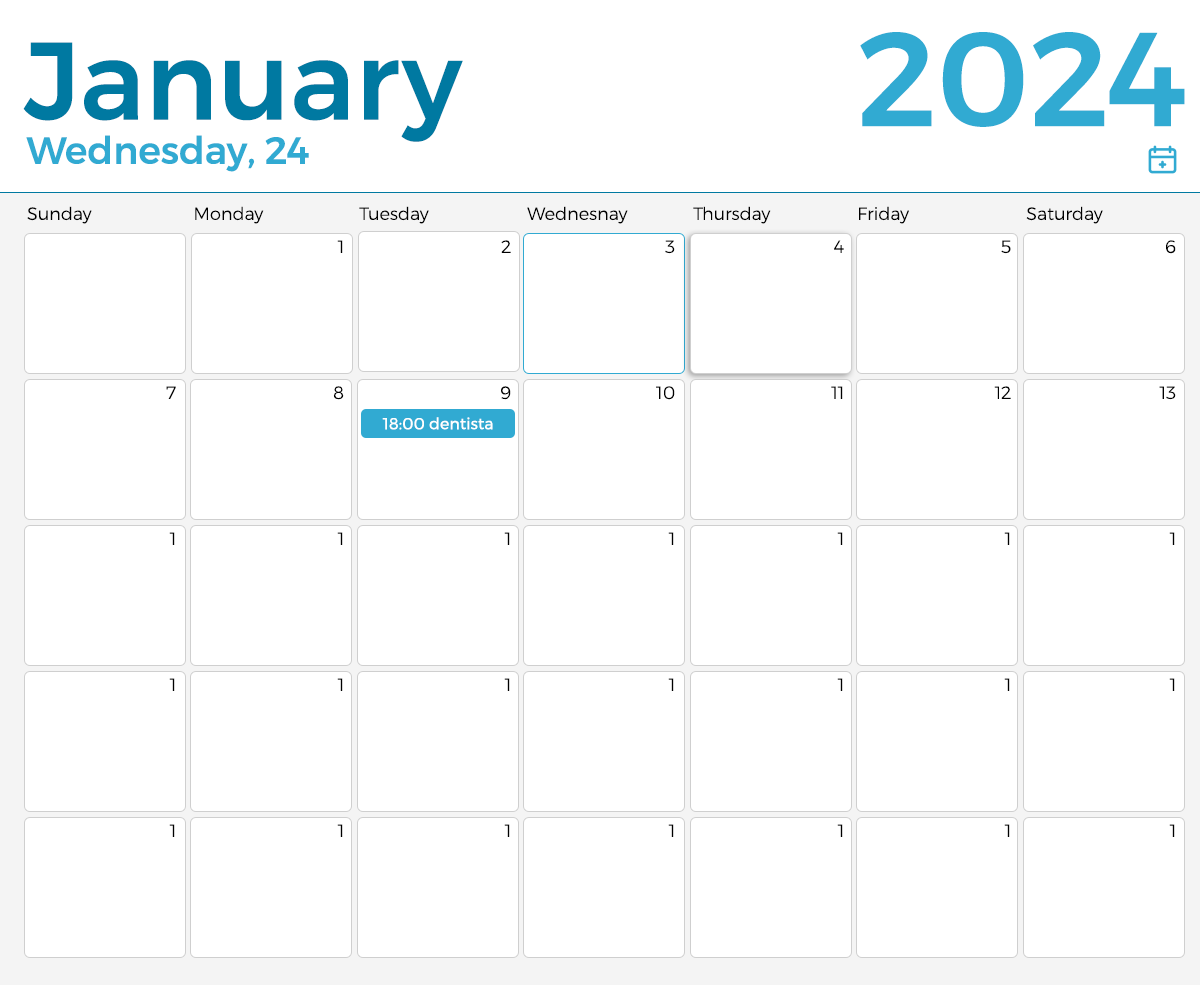
<style>
.page{position:relative;width:1200px;height:985px;background:#ffffff}
.page>*{position:absolute;margin:0}
.t1{font:133.2px "Montserrat-Medium";color:#31aad2}
.t2{font:109.9px "Montserrat-Medium";color:#0079a1}
.t3{font:37.8px "Montserrat-Medium";color:#31aad2}
.t4{font:17.8px "Montserrat-Light";color:#000000}
.t5{font:16px "Montserrat-Regular";color:#ffffff}
</style>
<div class="page">
<p class="t1" style="left:860px;top:32px;width:325px;height:95px">2024</p>
<p class="t2" style="left:23px;top:42px;width:440px;height:100px">January</p>
<p class="t3" style="left:26px;top:135px;width:283px;height:37px">Wednesday, 24</p>
<p class="t4" style="left:27px;top:206px;width:65px;height:18px">Sunday</p>
<p class="t4" style="left:195px;top:206px;width:69px;height:18px">Monday</p>
<p class="t4" style="left:359px;top:206px;width:70px;height:18px">Tuesday</p>
<p class="t4" style="left:527px;top:206px;width:101px;height:18px">Wednesnay</p>
<p class="t4" style="left:693px;top:206px;width:78px;height:18px">Thursday</p>
<p class="t4" style="left:859px;top:206px;width:50px;height:18px">Friday</p>
<p class="t4" style="left:1026px;top:206px;width:77px;height:18px">Saturday</p>
<p class="t4" style="left:337px;top:240px;width:6px;height:13px">1</p>
<p class="t4" style="left:501px;top:240px;width:10px;height:13px">2</p>
<p class="t4" style="left:665px;top:240px;width:10px;height:14px">3</p>
<p class="t4" style="left:834px;top:240px;width:10px;height:13px">4</p>
<p class="t4" style="left:1001px;top:240px;width:10px;height:14px">5</p>
<p class="t4" style="left:1166px;top:240px;width:10px;height:14px">6</p>
<p class="t4" style="left:166px;top:386px;width:10px;height:13px">7</p>
<p class="t4" style="left:333px;top:386px;width:11px;height:14px">8</p>
<p class="t4" style="left:501px;top:386px;width:10px;height:14px">9</p>
<p class="t4" style="left:656px;top:386px;width:19px;height:14px">10</p>
<p class="t4" style="left:831px;top:386px;width:12px;height:13px">11</p>
<p class="t4" style="left:994px;top:386px;width:17px;height:13px">12</p>
<p class="t4" style="left:1159px;top:386px;width:17px;height:14px">13</p>
<p class="t5" style="left:382px;top:417px;width:111px;height:13px">18:00 dentista</p>
<p class="t4" style="left:169px;top:532px;width:6px;height:13px">1</p>
<p class="t4" style="left:337px;top:532px;width:6px;height:13px">1</p>
<p class="t4" style="left:504px;top:532px;width:6px;height:13px">1</p>
<p class="t4" style="left:668px;top:532px;width:6px;height:13px">1</p>
<p class="t4" style="left:837px;top:532px;width:6px;height:13px">1</p>
<p class="t4" style="left:1004px;top:532px;width:6px;height:13px">1</p>
<p class="t4" style="left:1169px;top:532px;width:6px;height:13px">1</p>
<p class="t4" style="left:169px;top:678px;width:6px;height:13px">1</p>
<p class="t4" style="left:337px;top:678px;width:6px;height:13px">1</p>
<p class="t4" style="left:504px;top:678px;width:6px;height:13px">1</p>
<p class="t4" style="left:668px;top:678px;width:6px;height:13px">1</p>
<p class="t4" style="left:837px;top:678px;width:6px;height:13px">1</p>
<p class="t4" style="left:1004px;top:678px;width:6px;height:13px">1</p>
<p class="t4" style="left:1169px;top:678px;width:6px;height:13px">1</p>
<p class="t4" style="left:169px;top:824px;width:6px;height:13px">1</p>
<p class="t4" style="left:337px;top:824px;width:6px;height:13px">1</p>
<p class="t4" style="left:504px;top:824px;width:6px;height:13px">1</p>
<p class="t4" style="left:668px;top:824px;width:6px;height:13px">1</p>
<p class="t4" style="left:837px;top:824px;width:6px;height:13px">1</p>
<p class="t4" style="left:1004px;top:824px;width:6px;height:13px">1</p>
<p class="t4" style="left:1169px;top:824px;width:6px;height:13px">1</p>
</div>
